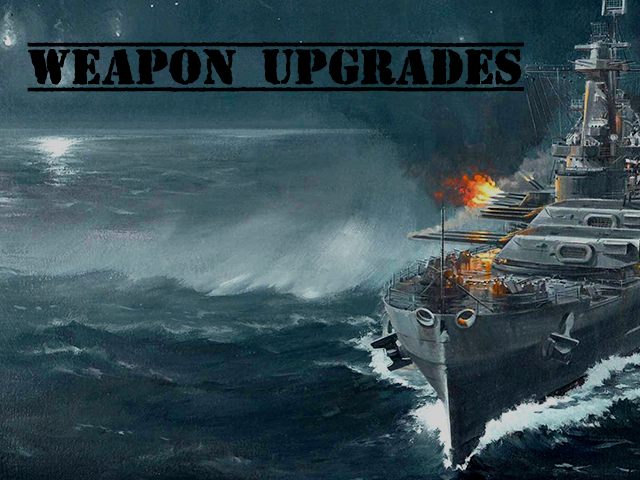
<style>
.page{position:relative;width:640px;height:480px}
.page>*{position:absolute;margin:0}
.t1{font:49.9px "TopSecret";letter-spacing:-0.02em;color:#000000;text-transform:uppercase;font-weight:bold}
</style>
<div class="page">
<p class="t1" style="left:27px;top:42px;width:497px;height:50px">weapon upgrades</p>
</div>
